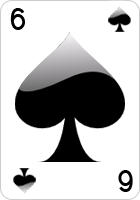
<style>
.page{position:relative;width:140px;height:200px;background:#ffffff}
.page>*{position:absolute;margin:0}
.t1{font:26px "CardCharacters";color:#000000}
</style>
<div class="page">
<p class="t1" style="left:10px;top:8px;width:15px;height:22px">6</p>
<p class="t1" style="left:118px;top:170px;width:15px;height:22px;rotate:180deg">6</p>
</div>
